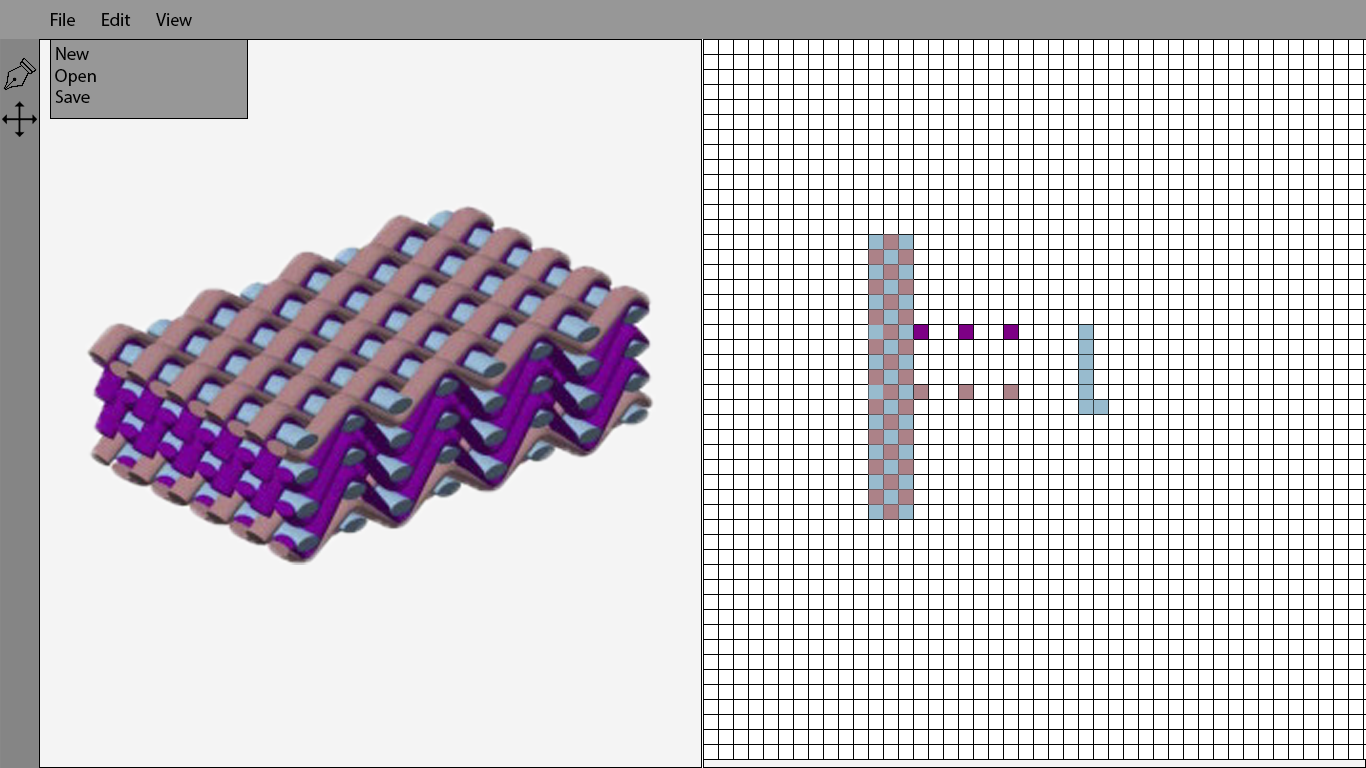
<style>
.page{position:relative;width:1366px;height:768px;background:#ffffff}
.page>*{position:absolute;margin:0}
.t1{font:18px "MyriadPro-Regular";color:#030303}
</style>
<div class="page">
<p class="t1" style="left:51px;top:13px;width:24px;height:13px">File</p>
<p class="t1" style="left:102px;top:13px;width:29px;height:13px">Edit</p>
<p class="t1" style="left:156px;top:13px;width:36px;height:13px">View</p>
<p class="t1" style="left:55px;top:47px;width:41px;height:56px">New<br>Open<br>Save</p>
</div>
